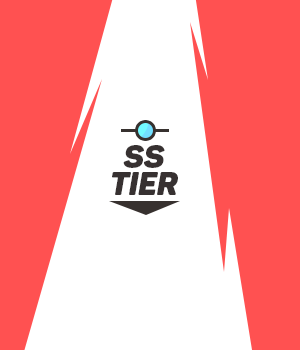
<style>
.page{position:relative;width:300px;height:350px;background:#ff5151}
.page>*{position:absolute;margin:0}
.t1{font:31.8px "Panton-BlackitalicCaps";color:#373131}
</style>
<div class="page">
<p class="t1" style="left:123px;top:145px;width:42px;height:23px">SS</p>
<p class="t1" style="left:112px;top:172px;width:66px;height:23px">TIER</p>
</div>
